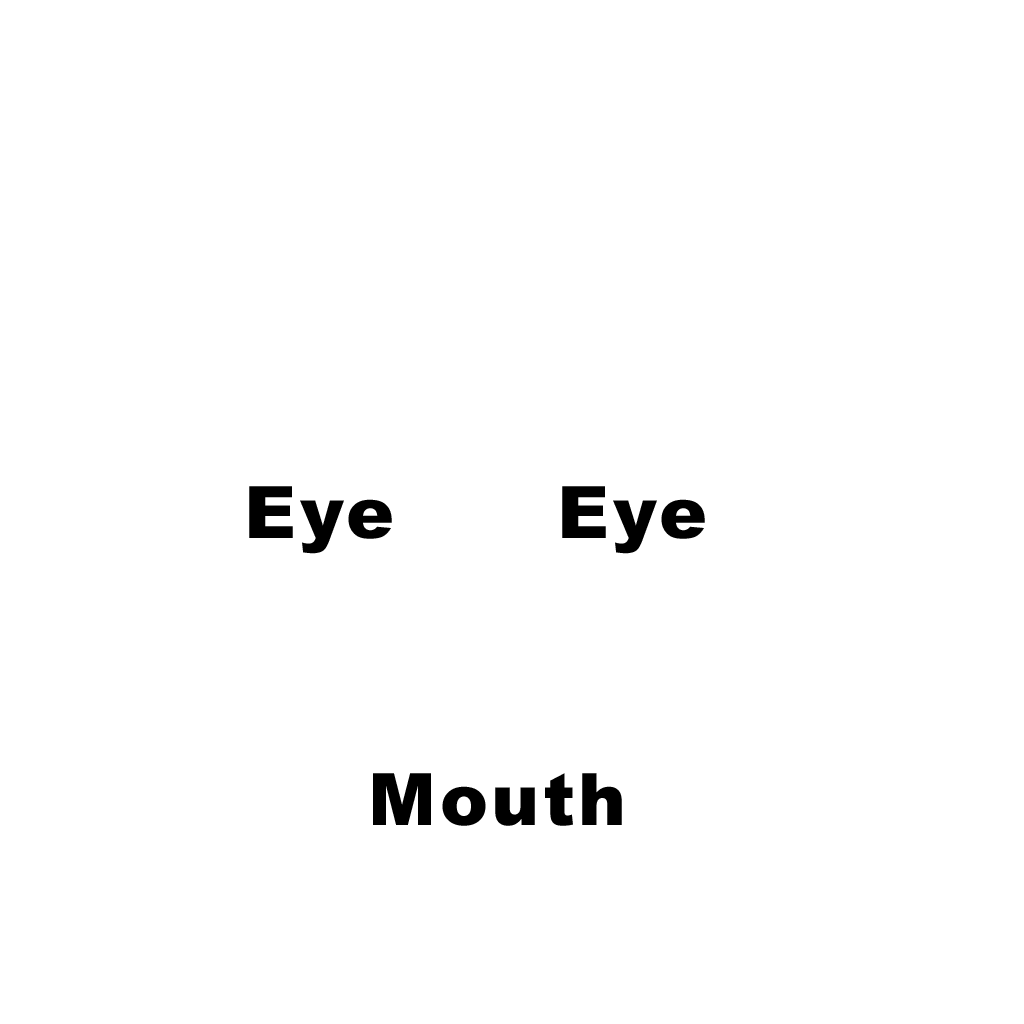
<style>
.page{position:relative;width:1024px;height:1024px;background:#ffffff}
.page>*{position:absolute;margin:0}
.t1{font:72.1px "Arial-Black";letter-spacing:0.05em;color:#000000}
</style>
<div class="page">
<p class="t1" style="left:249px;top:486px;width:143px;height:68px">Eye</p>
<p class="t1" style="left:562px;top:486px;width:143px;height:68px">Eye</p>
<p class="t1" style="left:373px;top:773px;width:249px;height:53px">Mouth</p>
</div>
